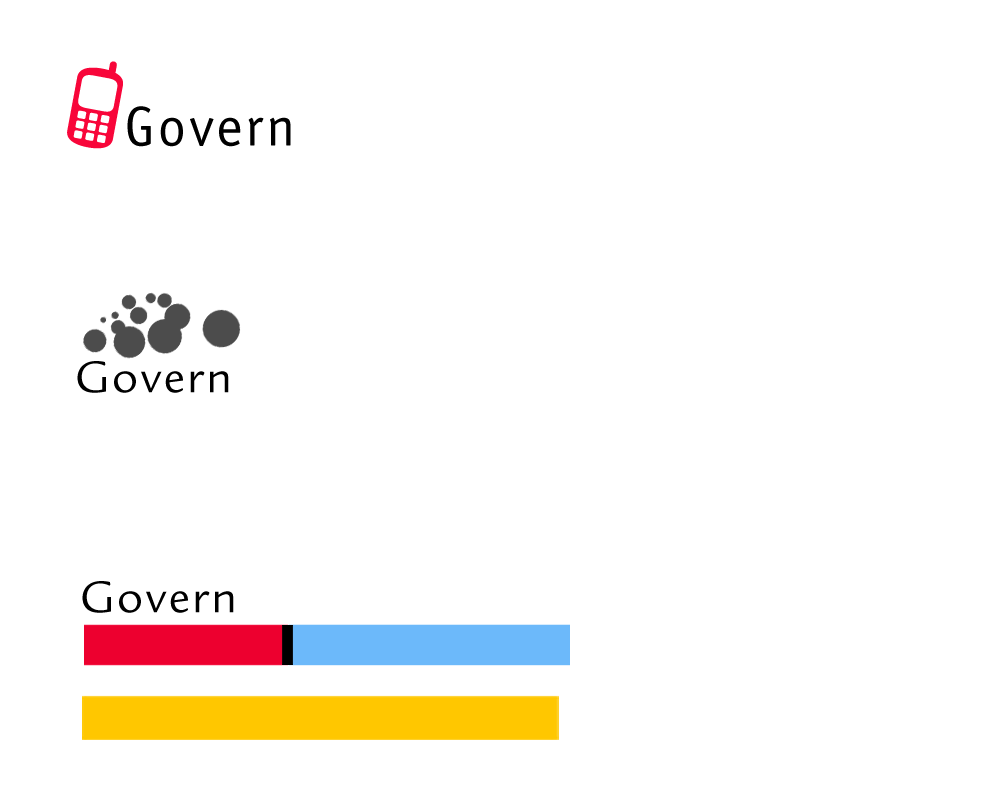
<style>
.page{position:relative;width:1000px;height:800px;background:#ffffff}
.page>*{position:absolute;margin:0}
.t1{font:56.4px "OfficinaSansStd-Book";letter-spacing:0.05em;color:#000000}
.t2{font:48.6px "LegacySansStd-Book";letter-spacing:0.05em;color:#000000}
</style>
<div class="page">
<p class="t1" style="left:127px;top:106px;width:164px;height:41px">Govern</p>
<p class="t2" style="left:77px;top:361px;width:152px;height:32px">Govern</p>
<p class="t2" style="left:82px;top:581px;width:152px;height:32px">Govern</p>
</div>
